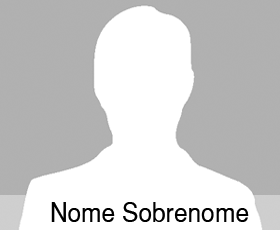
<style>
.page{position:relative;width:280px;height:230px;background:#ffffff}
.page>*{position:absolute;margin:0}
.t1{font:27px "SansSerif";color:#000000;scale:0.91 1}
</style>
<div class="page">
<p class="t1" style="left:51px;top:202px;width:198px;height:20px">Nome Sobrenome</p>
</div>
